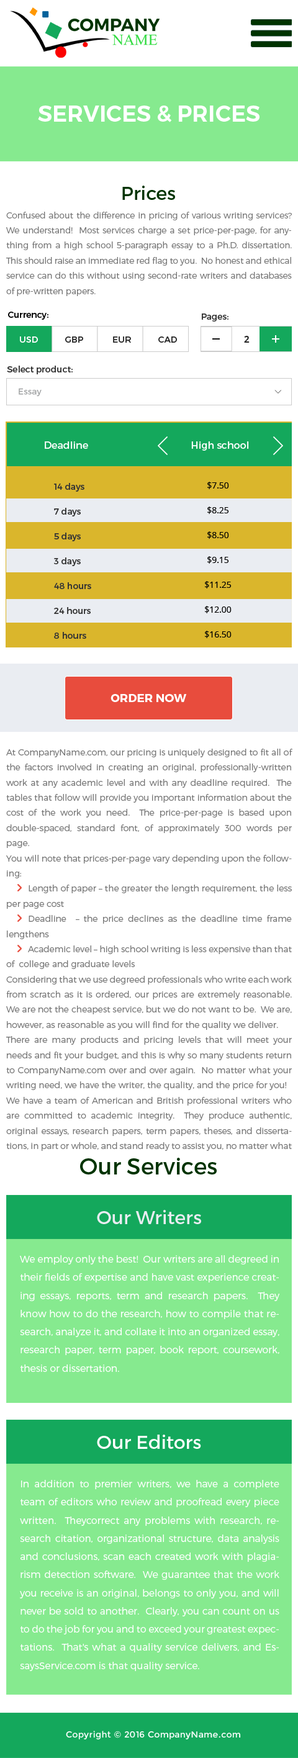
<style>
.page{position:relative;width:298px;height:1758px;background:#ffffff}
.page>*{position:absolute;margin:0}
.t1{font:22.3px "Montserrat-SemiBold";color:#ffffff;text-transform:uppercase}
.t2{font:18.6px "Montserrat-Regular";color:#003300}
.t3{font:8.5px/15.1px "Montserrat-Light";color:#777777}
.t4{font:8.7px "Montserrat-Regular";color:#000000}
.t5{font:8.7px "Montserrat-Regular";color:#343434}
.t6{font:8.7px "Montserrat-Regular";color:#292929}
.t7{font:8.7px "Montserrat-Regular";color:#ffffff}
.t8{font:9.3px "OpenSans-Bold";color:#292929}
.t9{font:8.7px "Montserrat-Regular";color:#9fa1a2}
.t10{font:9.9px "Montserrat-Regular";color:#ffffff}
.t11{font:8.7px/24.8px "Montserrat-Regular";color:#343434}
.t12{font:8.7px/24.8px "OpenSans";color:#000000}
.t13{font:11.5px "Montserrat-Bold";color:#ffffff;text-transform:uppercase}
.t14{font:8.7px/15.1px "Montserrat-Light";color:#777777}
.t15{font:22.3px "Montserrat-Regular";color:#003300}
.t16{font:18.6px "Montserrat-Regular";color:#eaedf2}
.t17{font:9.7px/18.2px "Montserrat-Light";color:#ffffff}
.t18{font:18.6px "Montserrat-Regular";color:#ffffff}
.t19{font:8.7px "Montserrat-Regular";letter-spacing:0.025em;color:#ffffff}
</style>
<div class="page">
<p class="t1" style="left:38px;top:106px;width:221px;height:16px">Services &amp; Prices</p>
<p class="t2" style="left:122px;top:186px;width:53px;height:14px">Prices</p>
<p class="t3" style="left:6px;top:212px;width:286px;height:84px;text-align:justify">Confused about the difference in pricing of various writing services? We understand!  Most services charge a set price-per-page, for anything from a high school 5-paragraph essay to a Ph.D. dissertation. This should raise an immediate red flag to you.  No honest and ethical service can do this without using second-rate writers and databases of pre-written papers.</p>
<p class="t4" style="left:8px;top:312px;width:40px;height:8px">Currency:</p>
<p class="t5" style="left:202px;top:313px;width:26px;height:9px">Pages:</p>
<p class="t6" style="left:20px;top:336px;width:157px;height:7px"><span class="t7">USD</span>            GBP             EUR            CAD</p>
<p class="t8" style="left:244px;top:336px;width:6px;height:7px">2</p>
<p class="t5" style="left:7px;top:366px;width:66px;height:8px">Select product:</p>
<p class="t9" style="left:19px;top:388px;width:23px;height:9px">Essay</p>
<p class="t10" style="left:45px;top:441px;width:204px;height:10px">Deadline                                        High school</p>
<p class="t11" style="left:54px;top:483px;width:37px;height:156px">14 days<br>7 days<br>5 days<br>3 days<br>48 hours<br>24 hours<br>8 hours</p>
<p class="t12" style="left:205px;top:482px;width:27px;height:156px;text-align:center">$7.50<br>$8.25<br>$8.50<br>$9.15<br>$11.25<br>$12.00<br>$16.50</p>
<p class="t13" style="left:110px;top:694px;width:77px;height:8px">Order NOW</p>
<p class="t14" style="left:6px;top:749px;width:287px;height:402px;text-align:justify">At CompanyName.com, our pricing is uniquely designed to fit all of the factors involved in creating an original, professionally-written work at any academic level and with any deadline required.  The tables that follow will provide you important information about the cost of the work you need.  The price-per-page is based upon double-spaced, standard font, of approximately 300 words per page. <br>You will note that prices-per-page vary depending upon the following:<br> Length of paper – the greater the length requirement, the less per page cost<br> Deadline  – the price declines as the deadline time frame lengthens <br> Academic level – high school writing is less expensive than that of  college and graduate levels<br>Considering that we use degreed professionals who write each work from scratch as it is ordered, our prices are extremely reasonable.  We are not the cheapest service, but we do not want to be.  We are, however, as reasonable as you will find for the quality we deliver.<br>There are many products and pricing levels that will meet your needs and fit your budget, and this is why so many students return to CompanyName.com over and over again.  No matter what your writing need, we have the writer, the quality, and the price for you!<br>We have a team of American and British professional writers who are committed to academic integrity.  They produce authentic, original essays, research papers, term papers, theses, and dissertations, in part or whole, and stand ready to assist you, no matter what the need.</p>
<p class="t15" style="left:80px;top:1158px;width:137px;height:16px">Our Services</p>
<p class="t16" style="left:97px;top:1210px;width:104px;height:14px">Our Writers</p>
<p class="t17" style="left:20px;top:1255px;width:260px;height:117px;text-align:justify">We employ only the best!  Our writers are all degreed in their fields of expertise and have vast experience creating essays, reports, term and research papers.  They know how to do the research, how to compile that research, analyze it, and collate it into an organized essay, research paper, term paper, book report, coursework, thesis or dissertation.</p>
<p class="t18" style="left:97px;top:1434px;width:104px;height:15px">Our Editors</p>
<p class="t17" style="left:20px;top:1480px;width:259px;height:191px;text-align:justify">In addition to premier writers, we have a complete team of editors who review and proofread every piece written.  Theycorrect any problems with research, research citation, organizational structure, data analysis and conclusions, scan each created work with plagiarism detection software.  We guarantee that the work you receive is an original, belongs to only you, and will never be sold to another.  Clearly, you can count on us to do the job for you and to exceed your greatest expectations.  That's what a quality service delivers, and EssaysService.com is that quality service.</p>
<p class="t19" style="left:66px;top:1730px;width:175px;height:10px">Copyright © 2016 CompanyName.com</p>
</div>
